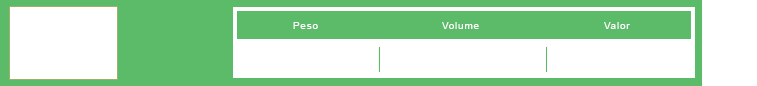
<style>
.page{position:relative;width:757px;height:86px;background:#ffffff}
.page>*{position:absolute;margin:0}
.t1{font:10px "ArialMT";letter-spacing:0.076em;color:#ffffff}
</style>
<div class="page">
<p class="t1" style="left:293px;top:22px;width:25px;height:7px">Peso</p>
<p class="t1" style="left:442px;top:22px;width:37px;height:7px">Volume</p>
<p class="t1" style="left:604px;top:22px;width:26px;height:7px">Valor</p>
</div>
